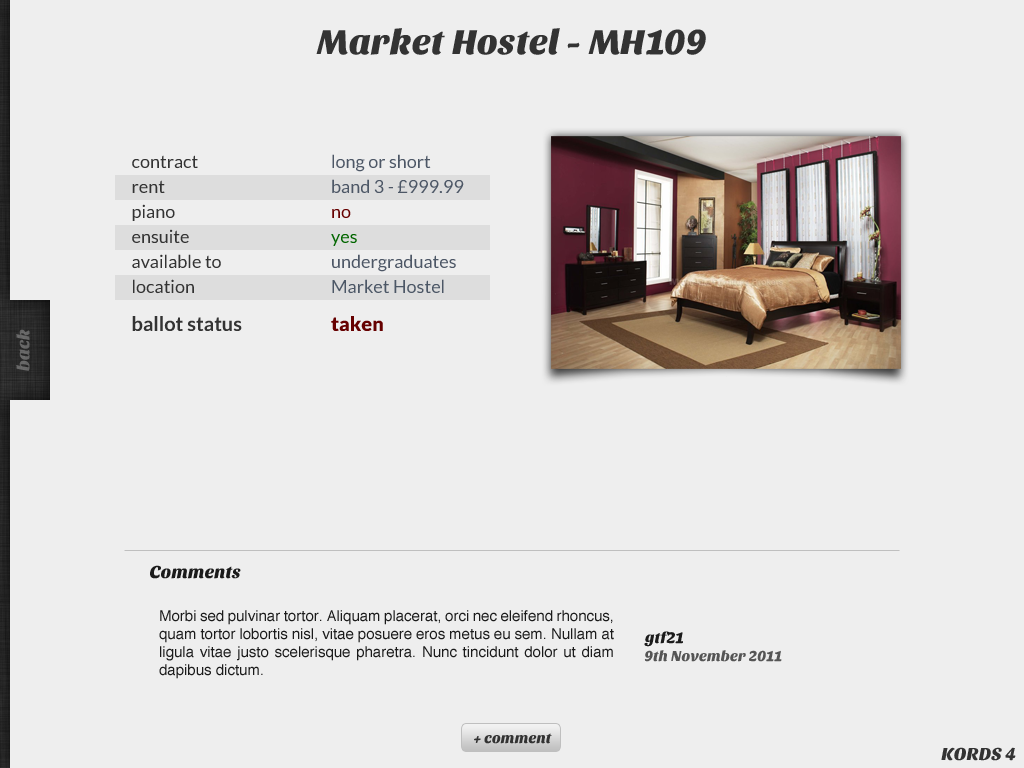
<style>
.page{position:relative;width:1024px;height:768px;background:#eeeeee}
.page>*{position:absolute;margin:0}
.t1{font:36px "SansitaOne";color:#333333}
.t2{font:18px "Lato-Regular";color:#333333}
.t3{font:18px "Lato-Regular";color:#4d5766}
.t4{font:18px "Lato-Regular";color:#660000}
.t5{font:18px "Lato-Regular";color:#026600}
.t6{font:18px "Lato-Regular";color:#4c5766}
.t7{font:20px "Lato-Bold";color:#333333}
.t8{font:20px "Lato-Black";color:#660000}
.t9{font:18px "SansitaOne";color:#676767}
.t10{font:18px "SansitaOne";color:#1b1b1b}
.t11{font:15px "Helvetica";color:#1b1b1b}
.t12{font:16px "SansitaOne";color:#1b1b1b}
.t13{font:15px "SansitaOne";color:#555555}
.t14{font:15px "SansitaOne";color:#333333}
.t15{font:18px "SansitaOne";color:#333333}
</style>
<div class="page">
<p class="t1" style="left:316px;top:28px;width:390px;height:27px">Market Hostel - MH109</p>
<p class="t2" style="left:132px;top:155px;width:66px;height:14px">contract</p>
<p class="t3" style="left:332px;top:154px;width:99px;height:18px">long or short</p>
<p class="t2" style="left:132px;top:180px;width:33px;height:13px">rent</p>
<p class="t3" style="left:332px;top:179px;width:132px;height:15px">band 3 - £999.99</p>
<p class="t2" style="left:132px;top:204px;width:43px;height:17px">piano</p>
<p class="t4" style="left:332px;top:209px;width:19px;height:9px">no</p>
<p class="t2" style="left:132px;top:229px;width:57px;height:14px">ensuite</p>
<p class="t5" style="left:331px;top:234px;width:26px;height:12px">yes</p>
<p class="t2" style="left:132px;top:254px;width:89px;height:15px">available to</p>
<p class="t3" style="left:332px;top:254px;width:124px;height:18px">undergraduates</p>
<p class="t2" style="left:133px;top:279px;width:61px;height:15px">location</p>
<p class="t6" style="left:332px;top:279px;width:112px;height:15px">Market Hostel</p>
<p class="t7" style="left:132px;top:316px;width:110px;height:15px">ballot status</p>
<p class="t8" style="left:331px;top:316px;width:52px;height:15px">taken</p>
<p class="t9" style="left:16px;top:329px;width:14px;height:42px;rotate:-90deg">back</p>
<p class="t10" style="left:150px;top:565px;width:91px;height:14px">Comments</p>
<p class="t11" style="left:159px;top:610px;width:455px;height:69px;text-align:justify">Morbi sed pulvinar tortor. Aliquam placerat, orci nec eleifend rhoncus, quam tortor lobortis nisl, vitae posuere eros metus eu sem. Nullam at ligula vitae justo scelerisque pharetra. Nunc tincidunt dolor ut diam dapibus dictum.</p>
<p class="t12" style="left:644px;top:631px;width:39px;height:16px">gtf21</p>
<p class="t13" style="left:644px;top:650px;width:138px;height:12px">9th November 2011</p>
<p class="t14" style="left:474px;top:733px;width:78px;height:11px">+ comment</p>
<p class="t15" style="left:941px;top:747px;width:75px;height:14px">KORDS 4</p>
</div>
